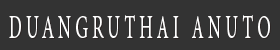
<style>
.page{position:relative;width:280px;height:50px;background:#333333}
.page>*{position:absolute;margin:0}
.t1{font:40px "AdobeThai-Regular";letter-spacing:0.2em;color:#ffffff;text-transform:uppercase;scale:0.54 1}
</style>
<div class="page">
<p class="t1" style="left:9px;top:15px;width:261px;height:23px">DUANGRUTHAI ANUTO</p>
</div>
